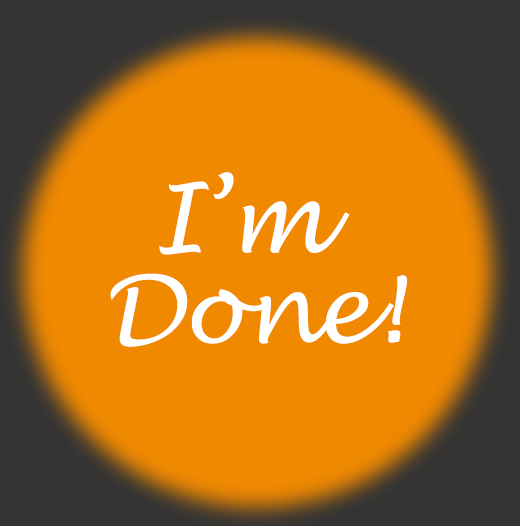
<style>
.page{position:relative;width:520px;height:526px;background:#f18900}
.page>*{position:absolute;margin:0}
.t1{font:92.7px/90.7px "LucidaHandwriting-Italic";letter-spacing:-0.02em;color:#ffffff}
</style>
<div class="page">
<p class="t1" style="left:110px;top:172px;width:297px;height:175px;text-align:center">I’m <br>Done!</p>
</div>
